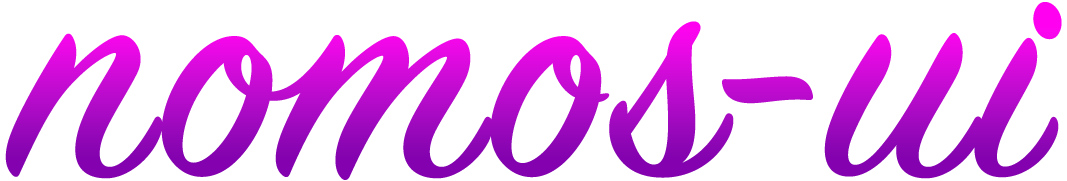
<style>
.page{position:relative;width:1067px;height:181px;background:#ffffff}
.page>*{position:absolute;margin:0}
.t1{font:346.6px "SignPainter-HouseScript";font-weight:bold}
</style>
<div class="page">
<p class="t1" style="left:5px;top:2px;width:1057px;height:178px">nomos-ui</p>
</div>
